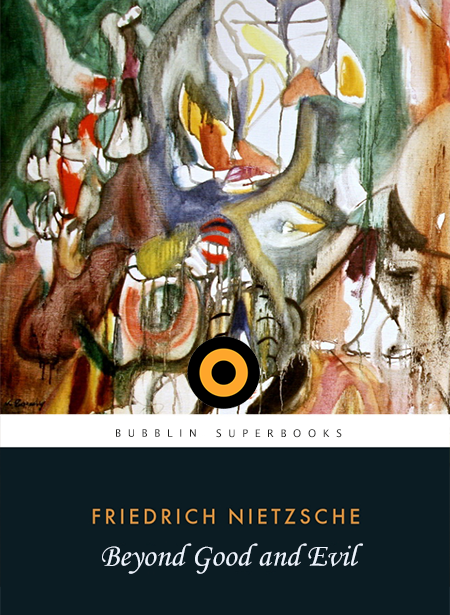
<style>
.page{position:relative;width:450px;height:615px;background:#0b1c23}
.page>*{position:absolute;margin:0}
.t1{font:10.5px "LucidaGrande";color:#222220}
.t2{font:31.9px "MonotypeCorsiva";color:#ecf3fd}
</style>
<div class="page">
<p class="t1" style="left:116px;top:429px;width:80px;height:8px">B  U  B  B  L  I  N</p>
<p class="t1" style="left:216px;top:429px;width:126px;height:9px">S  U  P  E  R  B  O  O  K  S</p>
<p class="t2" style="left:102px;top:543px;width:261px;height:31px">Beyond Good and Evil</p>
</div>
